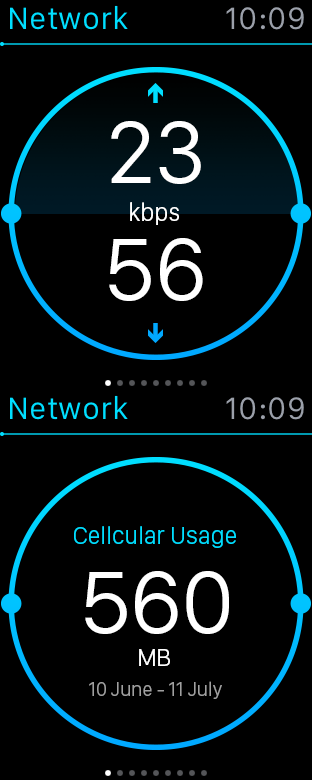
<style>
.page{position:relative;width:312px;height:780px;background:#000000}
.page>*{position:absolute;margin:0}
.t1{font:32px "SanFranciscoText-Regular";color:#00deff}
.t2{font:32px "SanFranciscoText-Regular";color:#9ba0aa}
.t3{font:92px "SanFranciscoDisplay-Regular";color:#ffffff}
.t4{font:25px "SanFranciscoDisplay-Regular";color:#ffffff}
.t5{font:25px "SanFranciscoDisplay-Light";color:#00deff}
.t6{font:20px "SanFranciscoDisplay-Light";color:#a0a0a0}
</style>
<div class="page">
<p class="t1" style="left:10px;top:5px;width:118px;height:25px">Network</p>
<p class="t2" style="left:226px;top:7px;width:78px;height:23px">10:09</p>
<p class="t3" style="left:111px;top:121px;width:90px;height:63px">23</p>
<p class="t4" style="left:130px;top:202px;width:49px;height:23px">kbps</p>
<p class="t3" style="left:109px;top:238px;width:94px;height:63px">56</p>
<p class="t1" style="left:10px;top:395px;width:118px;height:25px">Network</p>
<p class="t2" style="left:226px;top:397px;width:78px;height:23px">10:09</p>
<p class="t5" style="left:74px;top:526px;width:162px;height:22px">Cellcular Usage</p>
<p class="t3" style="left:85px;top:571px;width:144px;height:63px">560</p>
<p class="t4" style="left:139px;top:649px;width:31px;height:17px">MB</p>
<p class="t6" style="left:89px;top:681px;width:133px;height:18px">10 June - 11 July</p>
</div>
